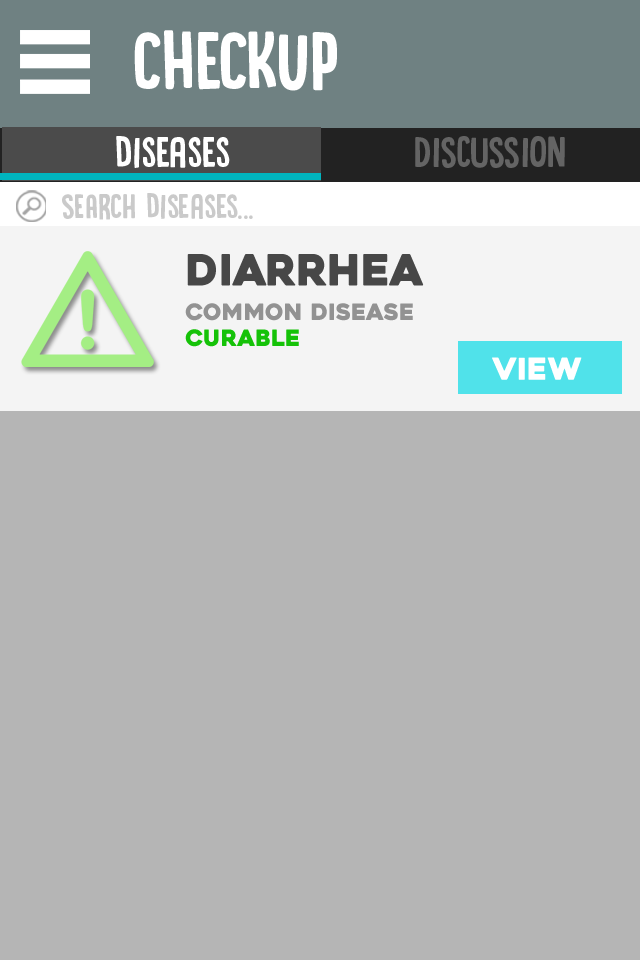
<style>
.page{position:relative;width:640px;height:960px;background:#b5b5b5}
.page>*{position:absolute;margin:0}
.t1{font:86.6px "DKCanoodle-Regular";color:#ffffff}
.t2{font:46.1px "DKCanoodle-Regular";color:#ffffff}
.t3{font:46.1px "DKCanoodle-Regular";color:#646464}
.t4{font:36.7px "DKCanoodle-Regular";color:#cacaca}
.t5{font:42.9px "Heavitas";color:#474747}
.t6{font:22.6px "Heavitas";color:#929292}
.t7{font:22.6px "Heavitas";color:#15c208}
.t8{font:30.3px "Heavitas";color:#ffffff}
</style>
<div class="page">
<p class="t1" style="left:134px;top:30px;width:203px;height:61px">checkup</p>
<p class="t2" style="left:116px;top:136px;width:114px;height:32px">diseases</p>
<p class="t3" style="left:415px;top:136px;width:150px;height:32px">DISCUSSION</p>
<p class="t4" style="left:62px;top:193px;width:191px;height:27px">SEARCH diseases...</p>
<p class="t5" style="left:187px;top:254px;width:237px;height:32px">Diarrhea</p>
<p class="t6" style="left:185px;top:303px;width:228px;height:18px">common disease</p>
<p class="t7" style="left:185px;top:329px;width:114px;height:18px">curable</p>
<p class="t8" style="left:492px;top:357px;width:90px;height:23px">VIEW</p>
</div>
